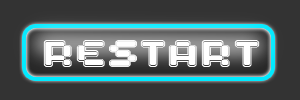
<style>
.page{position:relative;width:300px;height:100px;background:#333333}
.page>*{position:absolute;margin:0}
.t1{font:26.4px "Spaceboy";color:#ffffff;scale:1.3 1}
</style>
<div class="page">
<p class="t1" style="left:43px;top:40px;width:217px;height:27px">RESTART</p>
</div>
